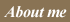
<style>
.page{position:relative;width:70px;height:22px;background:#897354}
.page>*{position:absolute;margin:0}
.t1{font:16px "TimesNewRomanPS-BoldItalicMT";letter-spacing:-0.02em;color:#ffffff}
</style>
<div class="page">
<p class="t1" style="left:4px;top:6px;width:63px;height:12px">About me</p>
<p class="t1" style="left:4px;top:6px;width:63px;height:12px">About me</p>
</div>
